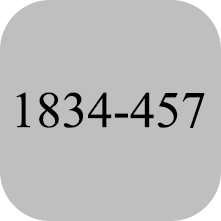
<style>
.page{position:relative;width:221px;height:221px;background:#bfbfbf}
.page>*{position:absolute;margin:0}
.t1{font:51.1px "TimesNewRomanPSMT";color:#000000}
</style>
<div class="page">
<p class="t1" style="left:16px;top:92px;width:189px;height:36px">1834-457</p>
</div>
